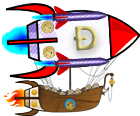
<style>
.page{position:relative;width:140px;height:116px;background:#ffffff}
.page>*{position:absolute;margin:0}
.t1{font:34.8px "LiberationSans-Bold"}
</style>
<div class="page">
<p class="t1" style="left:73px;top:26px;width:25px;height:25px;rotate:-4deg">Ɖ</p>
</div>
